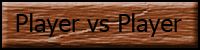
<style>
.page{position:relative;width:200px;height:50px}
.page>*{position:absolute;margin:0}
.t1{font:24px "Tahoma";color:#000000}
</style>
<div class="page">
<p class="t1" style="left:16px;top:13px;width:166px;height:24px">Player vs Player</p>
</div>
